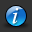
<style>
.page{position:relative;width:32px;height:32px;background:#333333}
.page>*{position:absolute;margin:0}
.t1{font:24px "TimesNewRomanPS-ItalicMT";color:#ffffff}
</style>
<div class="page">
<p class="t1" style="left:12px;top:8px;width:7px;height:16px">i</p>
</div>
